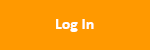
<style>
.page{position:relative;width:150px;height:50px;background:#ff9900}
.page>*{position:absolute;margin:0}
.t1{font:16px "Calibri-Bold";color:#ffffff}
</style>
<div class="page">
<p class="t1" style="left:56px;top:19px;width:38px;height:13px">Log In</p>
</div>
